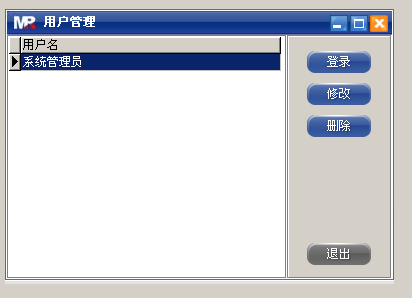
<style>
.page{position:relative;width:412px;height:298px;background:#ffffff}
.page>*{position:absolute;margin:0}
.t1{font:12px "SimSun";color:#ffffff}
</style>
<div class="page">
<p class="t1" style="left:327px;top:56px;width:23px;height:11px">登录</p>
<p class="t1" style="left:327px;top:88px;width:23px;height:11px">修改</p>
<p class="t1" style="left:327px;top:120px;width:23px;height:11px">删除</p>
<p class="t1" style="left:327px;top:248px;width:22px;height:11px">退出</p>
</div>
